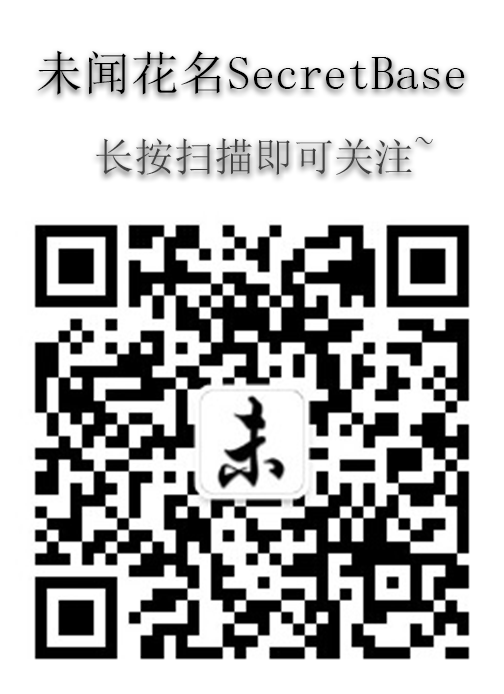
<style>
.page{position:relative;width:504px;height:694px;background:#ffffff}
.page>*{position:absolute;margin:0}
.t1{font:48px "SimSun";color:#000000}
.t2{font:40px "SimSun";color:#434343}
</style>
<div class="page">
<p class="t1" style="left:37px;top:50px;width:428px;height:45px">未闻花名SecretBase</p>
<p class="t2" style="left:95px;top:137px;width:338px;height:38px">长按扫描即可关注~</p>
</div>
